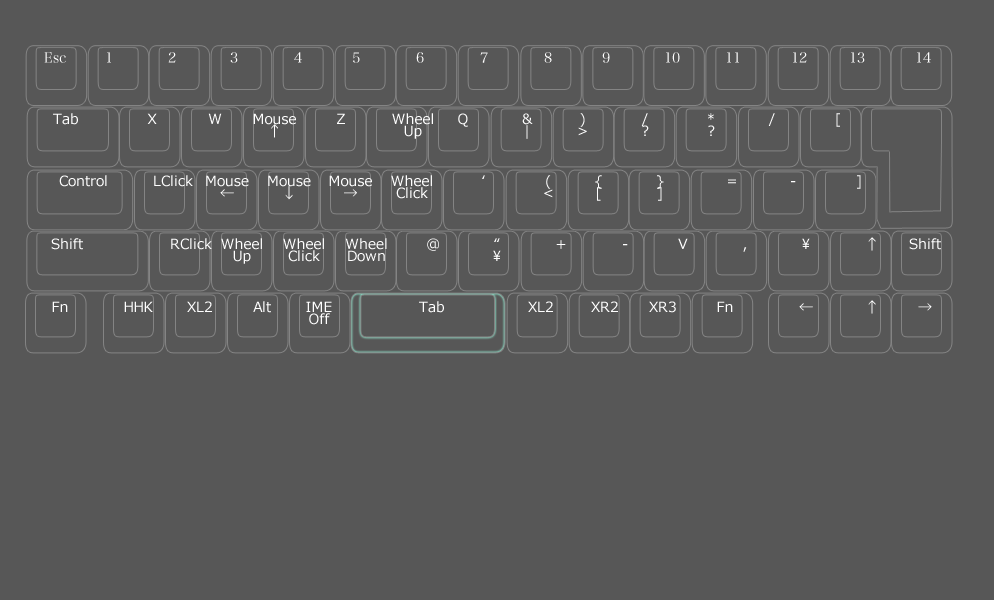
<style>
.page{position:relative;width:994px;height:600px;background:#575757}
.page>*{position:absolute;margin:0}
.t1{font:14px "HiraMinPro-W3";color:#ffffff}
.t2{font:14px "HiraMinPro-W3"}
.t3{font:14px "Meiryo";color:#ffffff}
.t4{font:14px/12px "Meiryo";color:#ffffff}
.t5{font:14px "Meiryo"}
</style>
<div class="page">
<p class="t1" style="left:44px;top:52px;width:22px;height:11px">Esc</p>
<p class="t2" style="left:107px;top:52px;width:4px;height:11px">1</p>
<p class="t1" style="left:168px;top:52px;width:8px;height:11px">2</p>
<p class="t1" style="left:230px;top:52px;width:8px;height:11px">3</p>
<p class="t1" style="left:294px;top:52px;width:8px;height:11px">4</p>
<p class="t2" style="left:353px;top:52px;width:7px;height:11px">5</p>
<p class="t1" style="left:416px;top:52px;width:8px;height:11px">6</p>
<p class="t1" style="left:480px;top:52px;width:8px;height:11px">7</p>
<p class="t1" style="left:544px;top:52px;width:8px;height:11px">8</p>
<p class="t1" style="left:602px;top:52px;width:8px;height:11px">9</p>
<p class="t1" style="left:666px;top:52px;width:14px;height:11px">10</p>
<p class="t2" style="left:727px;top:52px;width:12px;height:11px">11</p>
<p class="t1" style="left:793px;top:52px;width:14px;height:11px">12</p>
<p class="t1" style="left:851px;top:52px;width:14px;height:11px">13</p>
<p class="t1" style="left:917px;top:52px;width:14px;height:11px">14</p>
<p class="t3" style="left:53px;top:113px;width:25px;height:12px">Tab</p>
<p class="t3" style="left:147px;top:113px;width:10px;height:11px">X</p>
<p class="t3" style="left:208px;top:113px;width:14px;height:11px">W</p>
<p class="t4" style="left:253px;top:113px;width:43px;height:25px;text-align:center">Mouse<br>↑</p>
<p class="t3" style="left:337px;top:113px;width:8px;height:11px">Z</p>
<p class="t4" style="left:392px;top:113px;width:41px;height:26px;text-align:center">Wheel<br>Up</p>
<p class="t3" style="left:458px;top:113px;width:10px;height:14px">Q</p>
<p class="t4" style="left:522px;top:113px;width:11px;height:26px;text-align:center">&amp;<br>|</p>
<p class="t4" style="left:578px;top:113px;width:9px;height:23px;text-align:center">)<br>&gt;</p>
<p class="t4" style="left:641px;top:113px;width:8px;height:23px;text-align:center">/<br>?</p>
<p class="t4" style="left:708px;top:113px;width:7px;height:23px;text-align:center">*<br>?</p>
<p class="t3" style="left:768px;top:113px;width:7px;height:13px">/</p>
<p class="t5" style="left:836px;top:113px;width:4px;height:14px">[</p>
<p class="t3" style="left:59px;top:175px;width:48px;height:12px">Control</p>
<p class="t3" style="left:154px;top:175px;width:39px;height:12px">LClick</p>
<p class="t4" style="left:206px;top:175px;width:43px;height:22px;text-align:center">Mouse<br>←</p>
<p class="t4" style="left:268px;top:175px;width:43px;height:25px;text-align:center">Mouse<br>↓</p>
<p class="t4" style="left:329px;top:175px;width:43px;height:22px;text-align:center">Mouse<br>→</p>
<p class="t4" style="left:391px;top:175px;width:41px;height:24px;text-align:center">Wheel<br>Click</p>
<p class="t3" style="left:482px;top:175px;width:3px;height:4px">‘</p>
<p class="t4" style="left:544px;top:175px;width:9px;height:23px;text-align:center">(<br>&lt;</p>
<p class="t4" style="left:595px;top:175px;width:7px;height:26px;text-align:center">{<br>[</p>
<p class="t4" style="left:657px;top:175px;width:7px;height:26px;text-align:center">}<br>]</p>
<p class="t5" style="left:728px;top:179px;width:8px;height:5px">=</p>
<p class="t3" style="left:791px;top:181px;width:5px;height:2px">-</p>
<p class="t5" style="left:857px;top:175px;width:4px;height:14px">]</p>
<p class="t3" style="left:51px;top:238px;width:32px;height:12px">Shift</p>
<p class="t3" style="left:171px;top:238px;width:41px;height:12px">RClick</p>
<p class="t4" style="left:221px;top:238px;width:41px;height:26px;text-align:center">Wheel<br>Up</p>
<p class="t4" style="left:283px;top:238px;width:41px;height:24px;text-align:center">Wheel<br>Click</p>
<p class="t4" style="left:345px;top:238px;width:42px;height:24px;text-align:center">Wheel<br>Down</p>
<p class="t3" style="left:427px;top:238px;width:12px;height:13px">@</p>
<p class="t4" style="left:493px;top:238px;width:8px;height:23px;text-align:center">“<br>\</p>
<p class="t3" style="left:556px;top:240px;width:10px;height:9px">+</p>
<p class="t3" style="left:623px;top:244px;width:5px;height:2px">-</p>
<p class="t3" style="left:678px;top:238px;width:10px;height:11px">V</p>
<p class="t3" style="left:802px;top:238px;width:8px;height:11px">\</p>
<p class="t3" style="left:868px;top:237px;width:8px;height:14px">↑</p>
<p class="t3" style="left:909px;top:238px;width:32px;height:12px">Shift</p>
<p class="t3" style="left:743px;top:247px;width:4px;height:5px">,</p>
<p class="t3" style="left:52px;top:301px;width:16px;height:11px">Fn</p>
<p class="t3" style="left:124px;top:301px;width:29px;height:11px">HHK</p>
<p class="t3" style="left:187px;top:301px;width:25px;height:11px">XL2</p>
<p class="t3" style="left:253px;top:301px;width:18px;height:12px">Alt</p>
<p class="t4" style="left:306px;top:301px;width:26px;height:24px;text-align:center">IME Off</p>
<p class="t3" style="left:419px;top:301px;width:25px;height:12px">Tab</p>
<p class="t3" style="left:528px;top:301px;width:25px;height:11px">XL2</p>
<p class="t3" style="left:591px;top:301px;width:27px;height:11px">XR2</p>
<p class="t3" style="left:649px;top:301px;width:27px;height:12px">XR3</p>
<p class="t3" style="left:717px;top:301px;width:16px;height:11px">Fn</p>
<p class="t3" style="left:799px;top:303px;width:14px;height:8px">←</p>
<p class="t3" style="left:868px;top:300px;width:8px;height:14px">↑</p>
<p class="t3" style="left:918px;top:303px;width:14px;height:8px">→</p>
</div>
